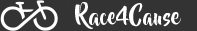
<style>
.page{position:relative;width:197px;height:31px;background:#333333}
.page>*{position:absolute;margin:0}
.t1{font:22px "BeyondTheMountains";color:#ffffff}
</style>
<div class="page">
<p class="t1" style="left:75px;top:2px;width:106px;height:27px">Race4Cause</p>
</div>
